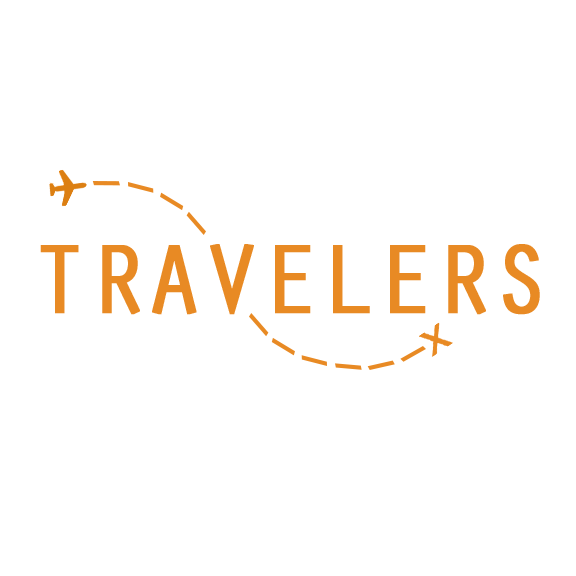
<style>
.page{position:relative;width:576px;height:576px;background:#ffffff}
.page>*{position:absolute;margin:0}
.t1{font:100px "OratorStd";letter-spacing:-0.05em;color:#e88a24;font-weight:bold}
</style>
<div class="page">
<p class="t1" style="left:40px;top:244px;width:500px;height:71px">TRAVELERS</p>
</div>
